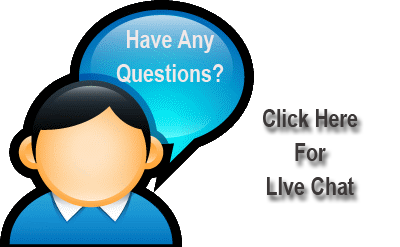
<style>
.page{position:relative;width:400px;height:247px;background:#ffffff}
.page>*{position:absolute;margin:0}
.t1{font:24.7px/34px "ArialNarrow-Bold";color:#f0e8e8}
.t2{font:24.7px/34px "ArialNarrow-Bold";color:#3c3838}
</style>
<div class="page">
<p class="t1" style="left:116px;top:30px;width:108px;height:53px;text-align:center">Have Any<br>Questions?</p>
<p class="t2" style="left:263px;top:109px;width:95px;height:86px;text-align:center">Click Here<br>For<br>LIve Chat</p>
</div>
